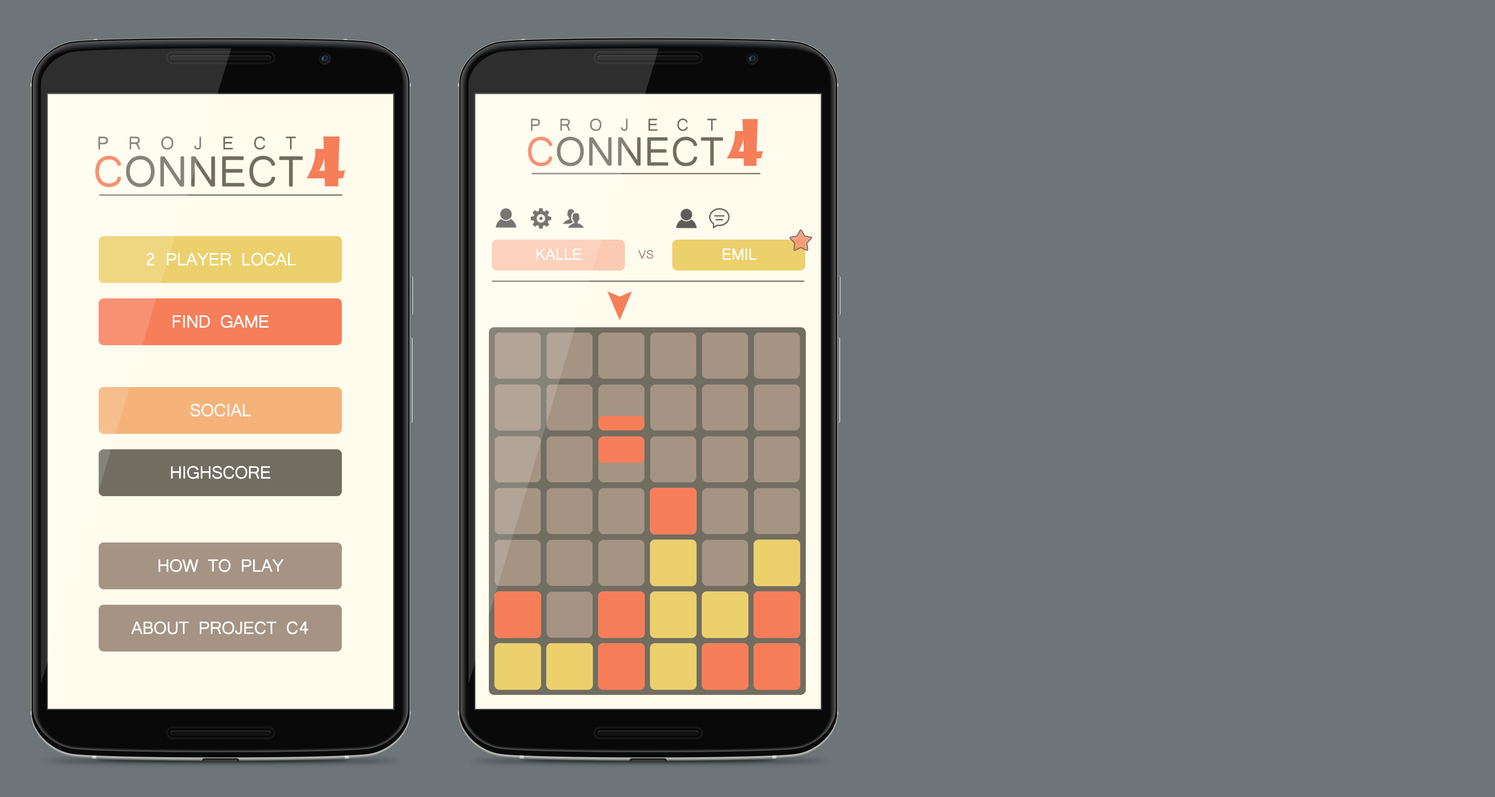
<style>
.page{position:relative;width:1495px;height:797px;background:#6d7578}
.page>*{position:absolute;margin:0}
.t1{font:21.2px "Microsoft-Yi-Baiti";letter-spacing:0.855em;color:#716d61;text-transform:uppercase;font-weight:bold}
.t2{font:62.3px "ShowcardGothic-Reg";color:#f67e59;text-transform:uppercase}
.t3{font:22.5px "Microsoft-Yi-Baiti";letter-spacing:0.855em;color:#716d61;text-transform:uppercase;font-weight:bold}
.t4{font:66.2px "ShowcardGothic-Reg";color:#f67e59;text-transform:uppercase}
.t5{font:50.4px "Microsoft-Yi-Baiti";color:#716d61;text-transform:uppercase;font-weight:bold}
.t6{font:50.4px "Microsoft-Yi-Baiti";color:#f67e59;text-transform:uppercase;font-weight:bold}
.t7{font:53.6px "Microsoft-Yi-Baiti";color:#716d61;text-transform:uppercase;font-weight:bold}
.t8{font:53.6px "Microsoft-Yi-Baiti";color:#f67e59;text-transform:uppercase;font-weight:bold}
.t9{font:21.9px "Microsoft-Yi-Baiti";letter-spacing:-0.025em;color:#ffffff;text-transform:uppercase;font-weight:bold}
.t10{font:19.9px "Microsoft-Yi-Baiti";letter-spacing:-0.025em;color:#ffffff;text-transform:uppercase;font-weight:bold}
.t11{font:15px "Microsoft-Yi-Baiti";letter-spacing:-0.025em;color:#a59484;text-transform:uppercase;font-weight:bold}
</style>
<div class="page">
<p class="t1" style="left:531px;top:119px;width:186px;height:12px">project</p>
<p class="t2" style="left:727px;top:119px;width:37px;height:47px">4</p>
<p class="t3" style="left:98px;top:137px;width:198px;height:13px">project</p>
<p class="t4" style="left:307px;top:137px;width:38px;height:49px">4</p>
<p class="t5" style="left:528px;top:137px;width:195px;height:29px"><span class="t6">c</span>onnect</p>
<p class="t7" style="left:95px;top:156px;width:208px;height:31px"><span class="t8">c</span>onnect</p>
<p class="t9" style="left:147px;top:253px;width:149px;height:13px">2 Player Local</p>
<p class="t10" style="left:536px;top:248px;width:46px;height:12px">Kalle</p>
<p class="t11" style="left:638px;top:250px;width:15px;height:9px">vs</p>
<p class="t10" style="left:723px;top:249px;width:34px;height:11px">Emil</p>
<p class="t9" style="left:172px;top:315px;width:97px;height:13px">find game</p>
<p class="t9" style="left:190px;top:404px;width:61px;height:13px">Social</p>
<p class="t9" style="left:171px;top:466px;width:100px;height:13px">Highscore</p>
<p class="t9" style="left:158px;top:559px;width:126px;height:14px">How to play</p>
<p class="t9" style="left:131px;top:622px;width:178px;height:13px">About Project C4</p>
</div>
